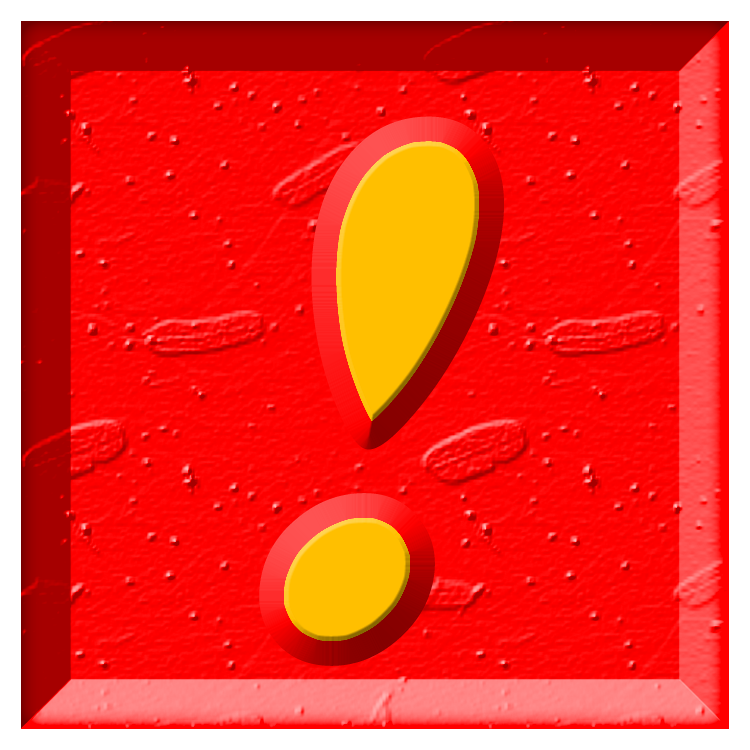
<style>
.page{position:relative;width:750px;height:750px}
.page>*{position:absolute;margin:0}
.t1{font:815.9px "CooperBlack";font-style:italic}
</style>
<div class="page">
<p class="t1" style="left:259px;top:116px;width:245px;height:550px">!</p>
</div>
